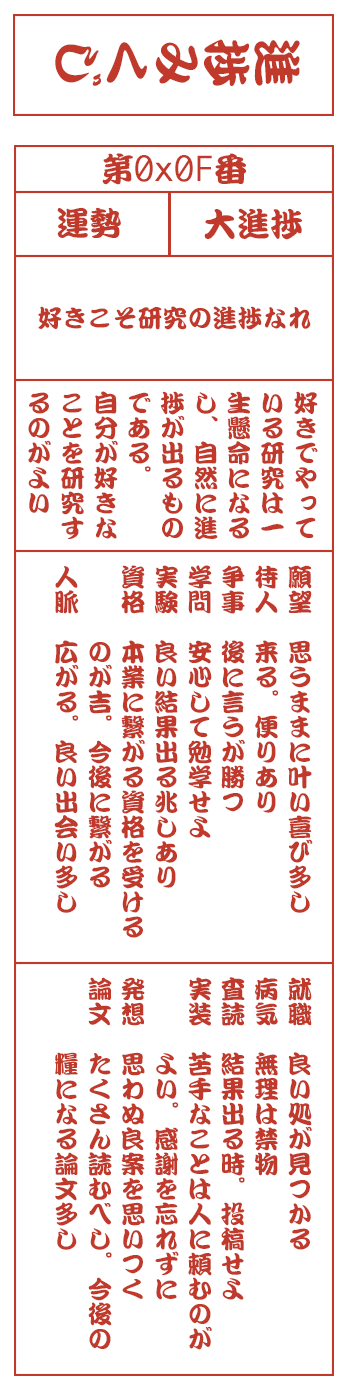
<style>
.page{position:relative;width:350px;height:1400px;background:#ffffff}
.page>*{position:absolute;margin:0}
.t1{font:50px "DFKanTeiRyu-XB-MP-RKSJ-H";color:#c0392b}
.t2{font:33.3px "Monaco";color:#c0392b}
.t3{font:33.3px "DFKanTeiRyu-XB-MP-RKSJ-H";color:#c0392b}
.t4{font:25px "DFKanTeiRyu-XB-MP-RKSJ-H";color:#c0392b}
.t5{font:25px/33.3px "DFKanTeiRyu-XB-MP-RKSJ-H";color:#c0392b}
</style>
<div class="page">
<p class="t1" style="left:55px;top:39px;width:245px;height:47px;rotate:90deg">進捗みくじ</p>
<p class="t2" style="left:102px;top:153px;width:144px;height:32px"><span class="t3">第</span>0x0F<span class="t3">番</span></p>
<p class="t3" style="left:57px;top:207px;width:64px;height:31px">運勢</p>
<p class="t3" style="left:204px;top:208px;width:98px;height:32px">大進捗</p>
<p class="t4" style="left:38px;top:306px;width:273px;height:24px">好きこそ研究の進捗なれ</p>
<p class="t5" style="left:28px;top:391px;width:290px;height:149px">好きでやって<br>いる研究は一<br>生懸命になる<br>し、自然に進<br>捗が出るもの<br>である。<br>自分が好きな<br>ことを研究す<br>るのがよい</p>
<p class="t5" style="left:54px;top:565px;width:259px;height:373px">願望　思うままに叶い喜び多し<br>待人　来る。便りあり<br>争事　後に言うが勝つ<br>学問　安心して勉学せよ<br>実験　良い結果出る兆しあり<br>資格　本業に繋がる資格を受ける<br>　　　のが吉。今後に繋がる<br>人脈　広がる。良い出会い多し</p>
<p class="t5" style="left:55px;top:977px;width:257px;height:373px">就職　良い処が見つかる<br>病気　無理は禁物<br>査読　結果出る時。投稿せよ<br>実装　苦手なことは人に頼むのが<br>　　　よい。感謝を忘れずに<br>発想　思わぬ良案を思いつく<br>論文　たくさん読むべし。今後の<br>　　　糧になる論文多し</p>
</div>
